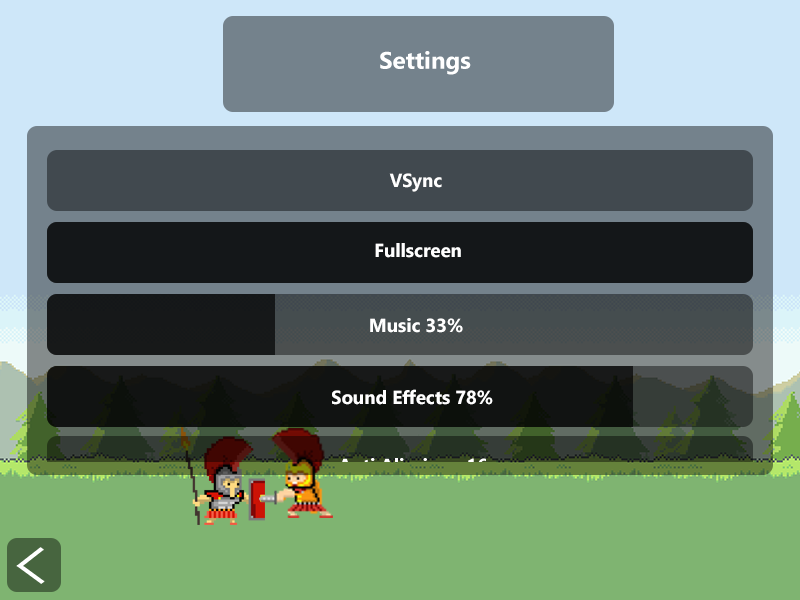
<style>
.page{position:relative;width:800px;height:600px}
.page>*{position:absolute;margin:0}
.t1{font:18.7px "SegoeUI-Bold";color:#ffffff}
</style>
<div class="page">
<p class="t1" style="left:389px;top:173px;width:53px;height:19px">VSync</p>
<p class="t1" style="left:375px;top:243px;width:86px;height:15px">Fullscreen</p>
<p class="t1" style="left:370px;top:318px;width:93px;height:15px">Music 33%</p>
<p class="t1" style="left:332px;top:389px;width:161px;height:16px">Sound Effects 78%</p>
</div>
